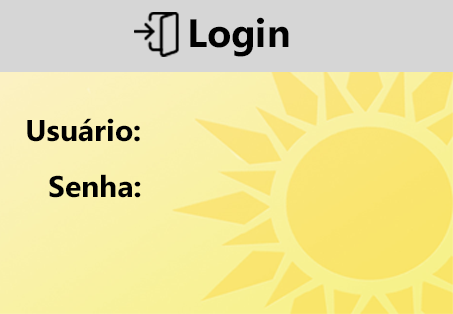
<style>
.page{position:relative;width:453px;height:314px;background:#d6d6d6}
.page>*{position:absolute;margin:0}
.t1{font:39.5px "SegoeUI-Bold";color:#000000}
.t2{font:30px "SegoeUI-Bold";color:#000000}
</style>
<div class="page">
<p class="t1" style="left:190px;top:17px;width:99px;height:40px">Login</p>
<p class="t2" style="left:27px;top:118px;width:113px;height:24px">Usuário:</p>
<p class="t2" style="left:49px;top:174px;width:92px;height:24px">Senha:</p>
</div>
